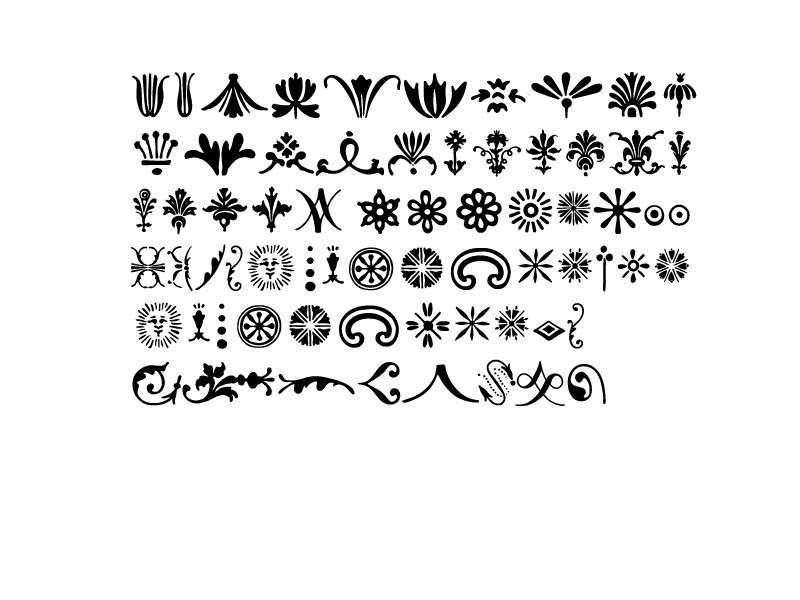
<style>
.page{position:relative;width:800px;height:600px;background:#ffffff}
.page>*{position:absolute;margin:0}
.t1{font:48px "BodoniOrnamentsITCTT";letter-spacing:0.01em;color:#000000}
</style>
<div class="page">
<p class="t1" style="left:131px;top:72px;width:566px;height:334px">abcdefghij<br>klmnopqrstu<br>vwxyz 12345678<br>ABCFRÏ!"§$%&amp;()`’*<br>!§"$%&amp;/()=?<br>¶¢[]|}{≠</p>
</div>
